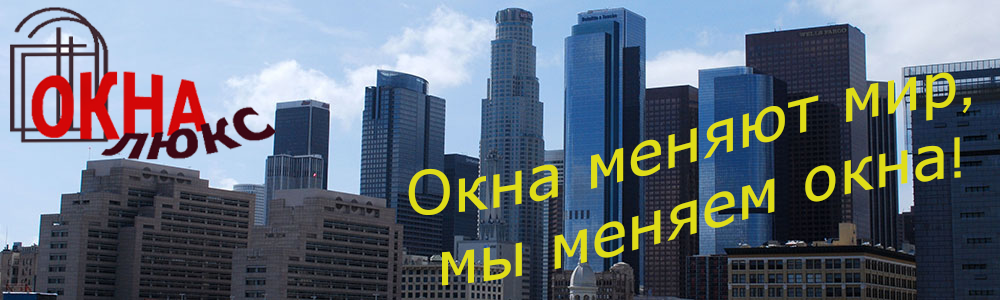
<style>
.page{position:relative;width:1000px;height:300px}
.page>*{position:absolute;margin:0}
.t1{font:60px "Verdana";color:#dfdd18}
.t2{font:60px "Shruti";color:#dfdd18}
</style>
<div class="page">
<p class="t1" style="left:408px;top:72px;width:563px;height:214px;text-align:center">Окна меняют мир<span class="t2">, <br></span>мы меняем окна<span class="t2">!</span></p>
</div>
